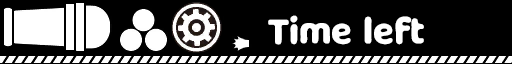
<style>
.page{position:relative;width:512px;height:64px;background:#000000}
.page>*{position:absolute;margin:0}
.t1{font:36px "MilkyNiceClean";color:#ffffff}
</style>
<div class="page">
<p class="t1" style="left:268px;top:15px;width:156px;height:30px">Time left</p>
</div>
